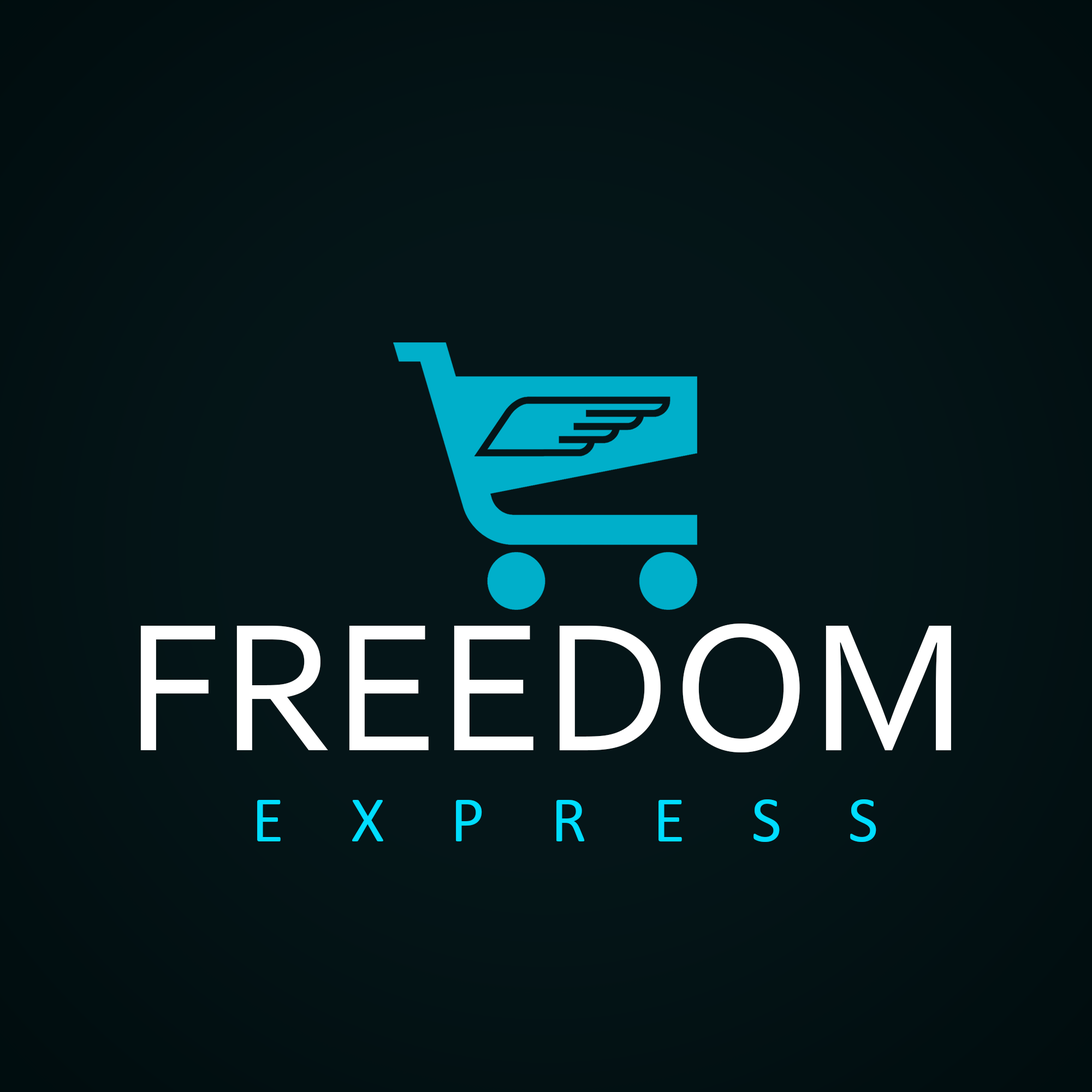
<style>
.page{position:relative;width:1092px;height:1092px;background:#051518}
.page>*{position:absolute;margin:0}
.t1{font:190.4px "Corbel";color:#ffffff}
.t2{font:66.1px "Calibri";letter-spacing:1em;color:#00ddff}
</style>
<div class="page">
<p class="t1" style="left:140px;top:624px;width:811px;height:128px">FREEDOM</p>
<p class="t2" style="left:257px;top:799px;width:619px;height:43px">EXPRESS</p>
</div>
